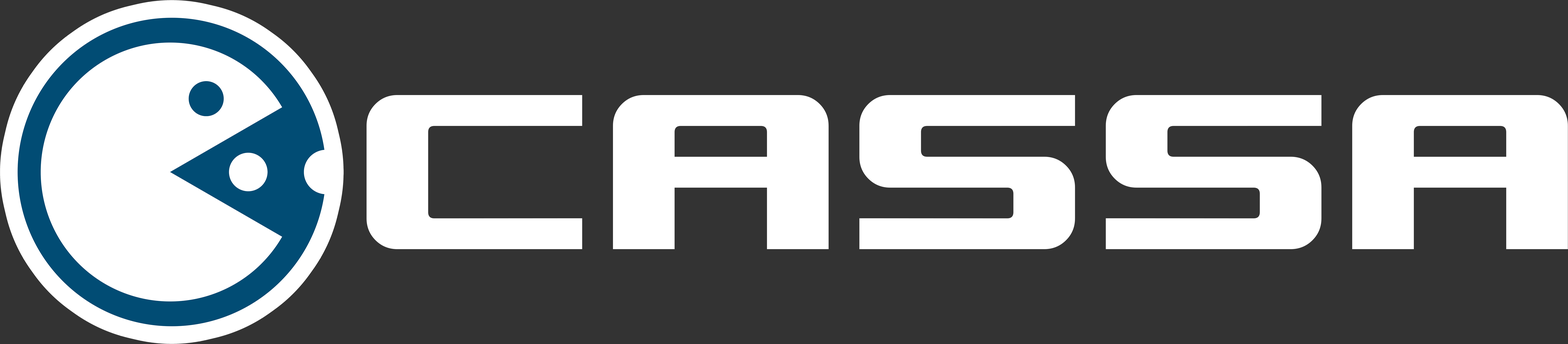
<style>
.page{position:relative;width:1568px;height:344px;background:#333333}
.page>*{position:absolute;margin:0}
.t1{font:246.4px "SpaceMarine-Nominal";color:#ffffff}
</style>
<div class="page">
<p class="t1" style="left:366px;top:95px;width:1202px;height:154px">CASSA</p>
</div>
